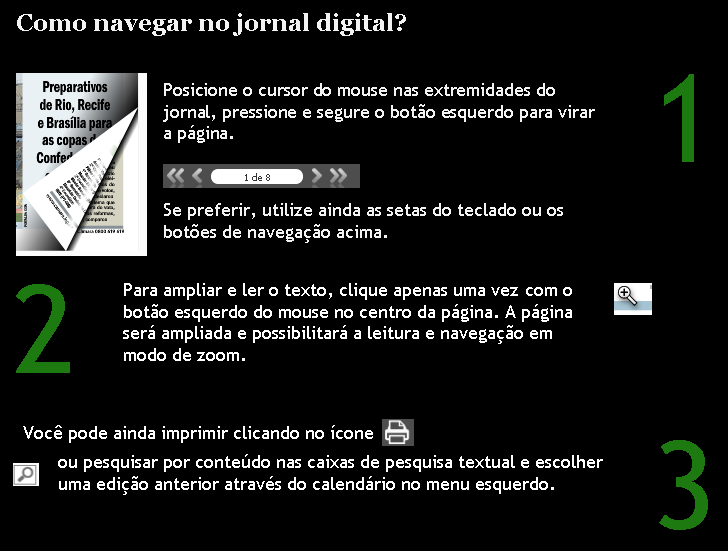
<style>
.page{position:relative;width:728px;height:551px;background:#000000}
.page>*{position:absolute;margin:0}
.t1{font:24px "Georgia-Bold";color:#f3f3f3}
.t2{font:122px "TrebuchetMS";color:#1d7a11}
.t3{font:18px "TrebuchetMS";color:#f3f3f3}
.t4{font:18px "TrebuchetMS";color:#ffffff}
</style>
<div class="page">
<p class="t1" style="left:17px;top:13px;width:389px;height:23px">Como navegar no jornal digital?</p>
<p class="t2" style="left:664px;top:74px;width:30px;height:88px">1</p>
<p class="t3" style="left:163px;top:83px;width:432px;height:60px">Posicione o cursor do mouse nas extremidades do jornal, pressione e segure o botão esquerdo para virar a página.</p>
<p class="t3" style="left:164px;top:203px;width:399px;height:40px">Se preferir, utilize ainda as setas do teclado ou os botões de navegação acima.</p>
<p class="t2" style="left:16px;top:284px;width:54px;height:89px">2</p>
<p class="t4" style="left:123px;top:283px;width:449px;height:78px">Para ampliar e ler o texto, clique apenas uma vez com o botão esquerdo do mouse no centro da página. A página será ampliada e possibilitará a leitura e navegação em modo de zoom.</p>
<p class="t4" style="left:23px;top:425px;width:350px;height:18px">Você pode ainda imprimir clicando no ícone</p>
<p class="t2" style="left:659px;top:440px;width:49px;height:90px">3</p>
<p class="t4" style="left:58px;top:454px;width:545px;height:41px">ou pesquisar por conteúdo nas caixas de pesquisa textual e escolher uma edição anterior através do calendário no menu esquerdo.</p>
</div>
